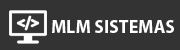
<style>
.page{position:relative;width:180px;height:50px;background:#333333}
.page>*{position:absolute;margin:0}
.t1{font:18px "MyriadPro-Bold";color:#ffffff}
</style>
<div class="page">
<p class="t1" style="left:52px;top:20px;width:122px;height:13px">MLM SISTEMAS</p>
</div>
